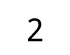
<style>
.page{position:relative;width:70px;height:55px;background:#ffffff}
.page>*{position:absolute;margin:0}
.t1{font:31.8px "DroidSans";color:#000000}
</style>
<div class="page">
<p class="t1" style="left:28px;top:18px;width:15px;height:24px">2</p>
</div>
